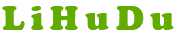
<style>
.page{position:relative;width:181px;height:39px;background:#ffffff}
.page>*{position:absolute;margin:0}
.t1{font:34.8px "CooperBlack";letter-spacing:0.2em;color:#62ab00}
</style>
<div class="page">
<p class="t1" style="left:2px;top:6px;width:172px;height:24px">LiHuDu</p>
</div>
